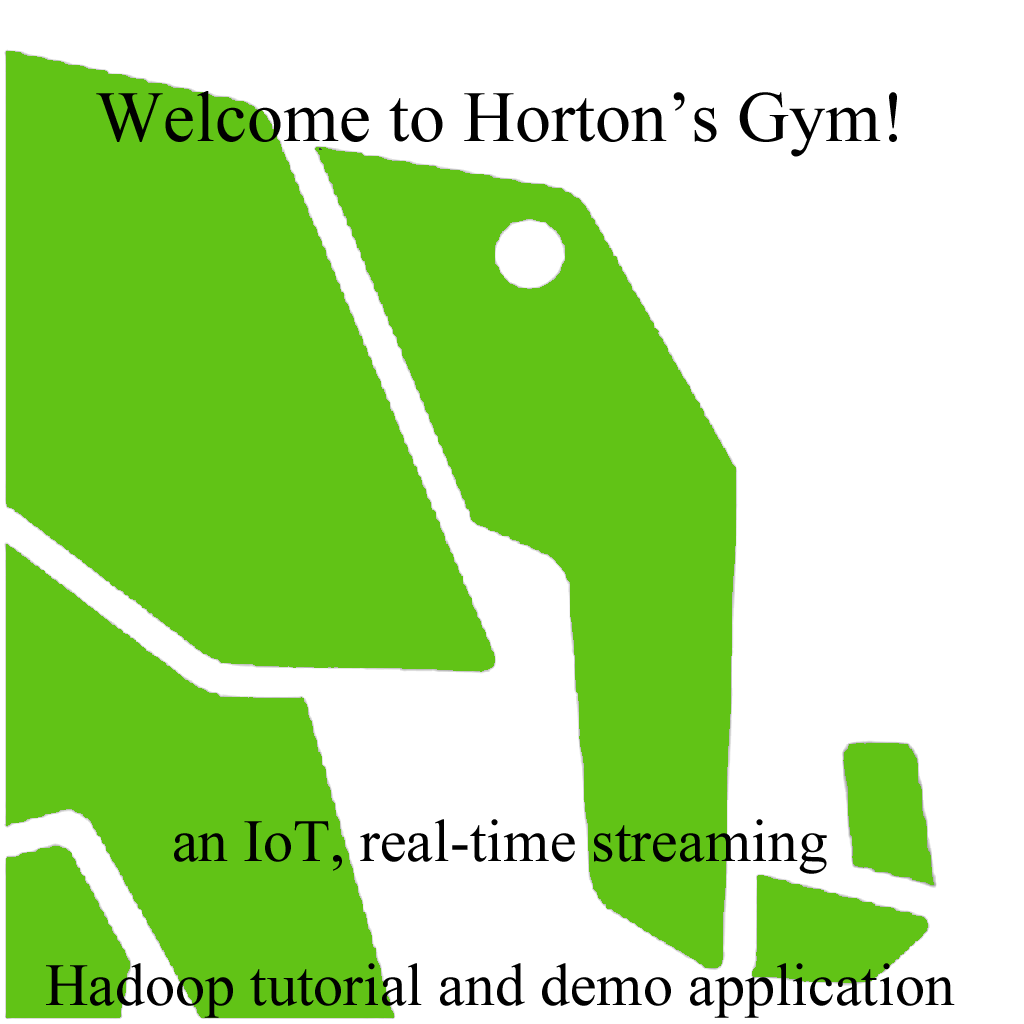
<style>
.page{position:relative;width:1024px;height:1024px;background:#ffffff}
.page>*{position:absolute;margin:0}
.t1{font:60px "TimesNewRomanPSMT";color:#000000}
.t2{font:72px "TimesNewRomanPSMT";color:#000000}
</style>
<div class="page">
<p class="t1" style="left:46px;top:91px;width:909px;height:927px;text-align:center"><span class="t2">Welcome to Horton’s Gym!<br></span><br><br><br><br><br><br><br><br><br>an IoT, real-time streaming<br><br>Hadoop tutorial and demo application</p>
</div>
